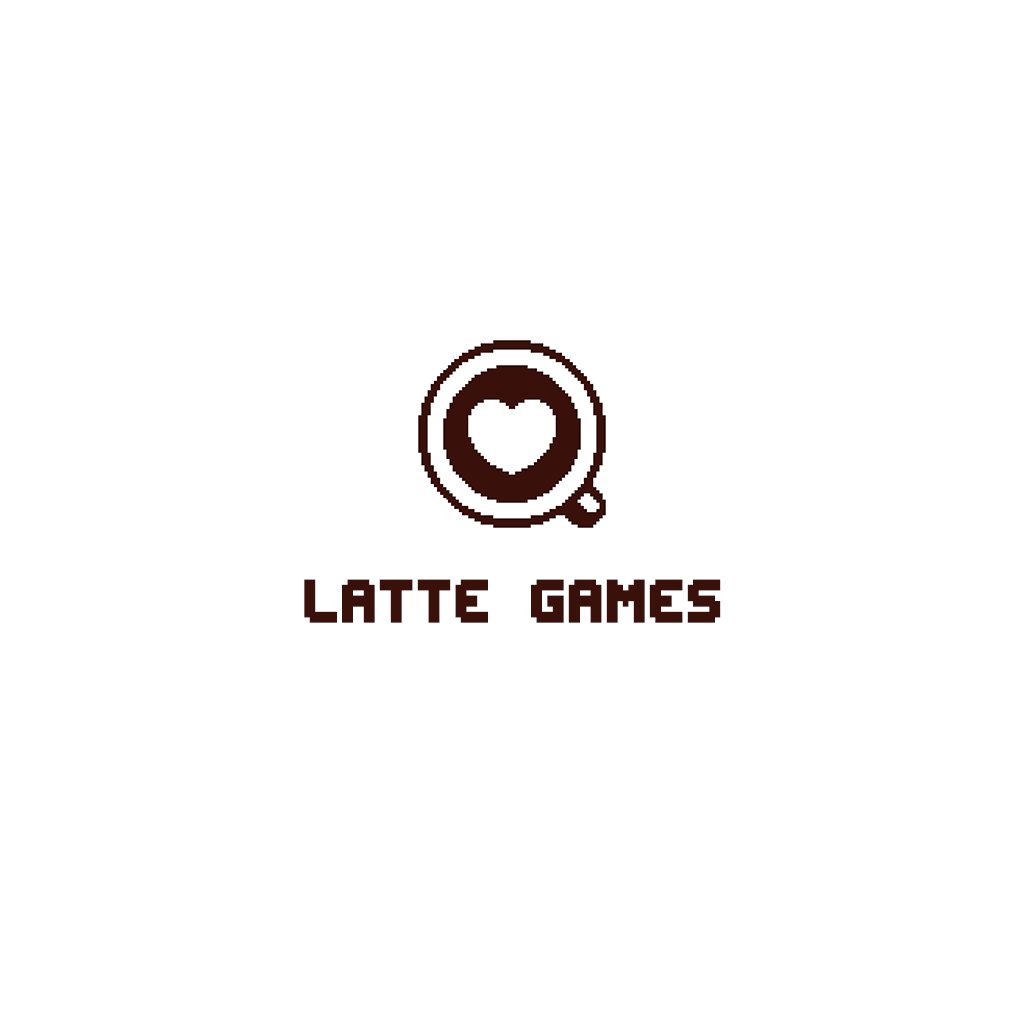
<style>
.page{position:relative;width:1024px;height:1024px;background:#ffffff}
.page>*{position:absolute;margin:0}
.t1{font:75px "EditUndoBRK";color:#3a110a}
</style>
<div class="page">
<p class="t1" style="left:304px;top:579px;width:417px;height:44px">LATTE GAMES</p>
</div>
